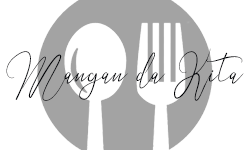
<style>
.page{position:relative;width:250px;height:150px;background:#ffffff}
.page>*{position:absolute;margin:0}
.t1{font:42.8px "AlifiyahRegular";color:#000104}
</style>
<div class="page">
<p class="t1" style="left:6px;top:48px;width:238px;height:53px">Mangan da Kita</p>
</div>
